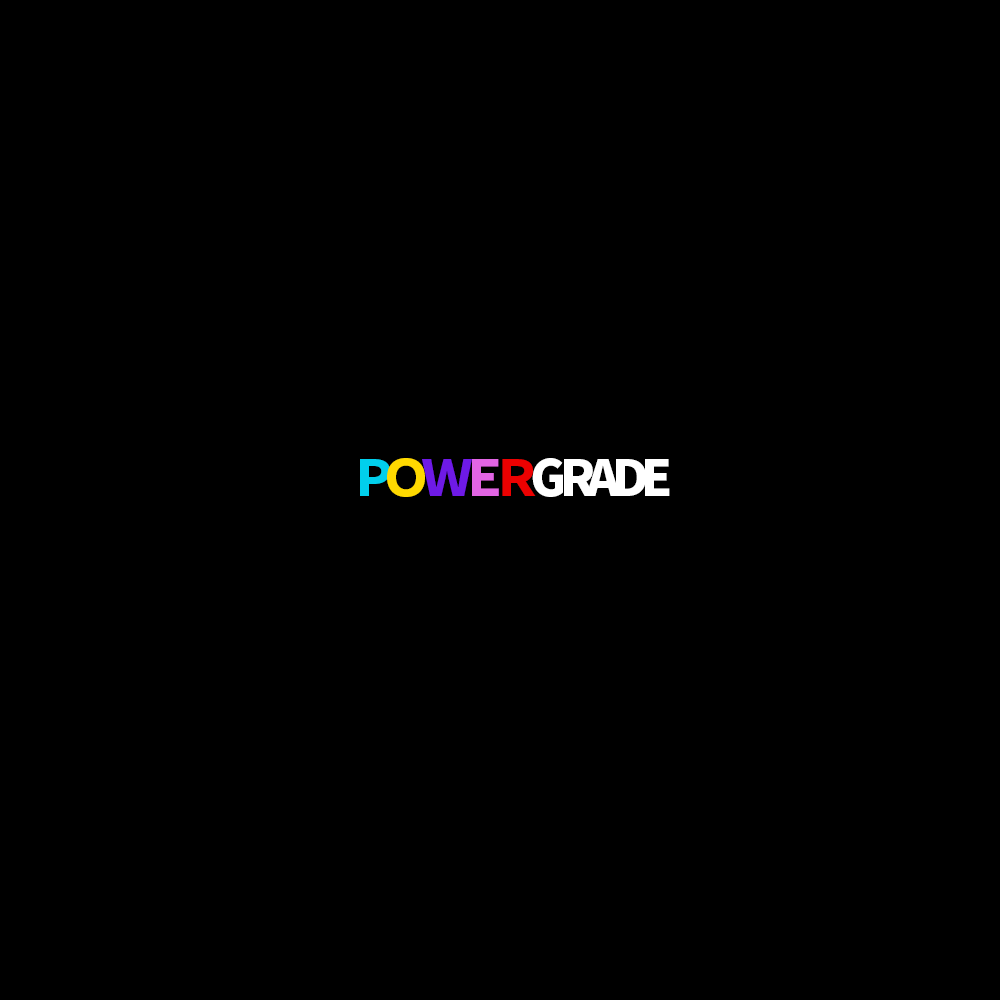
<style>
.page{position:relative;width:1000px;height:1000px;background:#000000}
.page>*{position:absolute;margin:0}
.t1{font:50px "NotoSansCJKtc-Black";letter-spacing:-0.15em;color:#ffffff}
.t2{font:50px "NotoSansCJKtc-Black";letter-spacing:-0.15em;color:#01cfec}
.t3{font:50px "NotoSansCJKtc-Black";letter-spacing:-0.15em;color:#ffd900}
.t4{font:50px "NotoSansCJKtc-Black";letter-spacing:-0.15em;color:#6e1ae6}
.t5{font:50px "NotoSansCJKtc-Black";letter-spacing:-0.15em;color:#e265e4}
.t6{font:50px "NotoSansCJKtc-Black";letter-spacing:-0.15em;color:#ec0101}
</style>
<div class="page">
<p class="t1" style="left:360px;top:458px;width:310px;height:39px"><span class="t2">P</span><span class="t3">O</span><span class="t4">W</span><span class="t5">E</span><span class="t6">R</span>GRADE</p>
</div>
